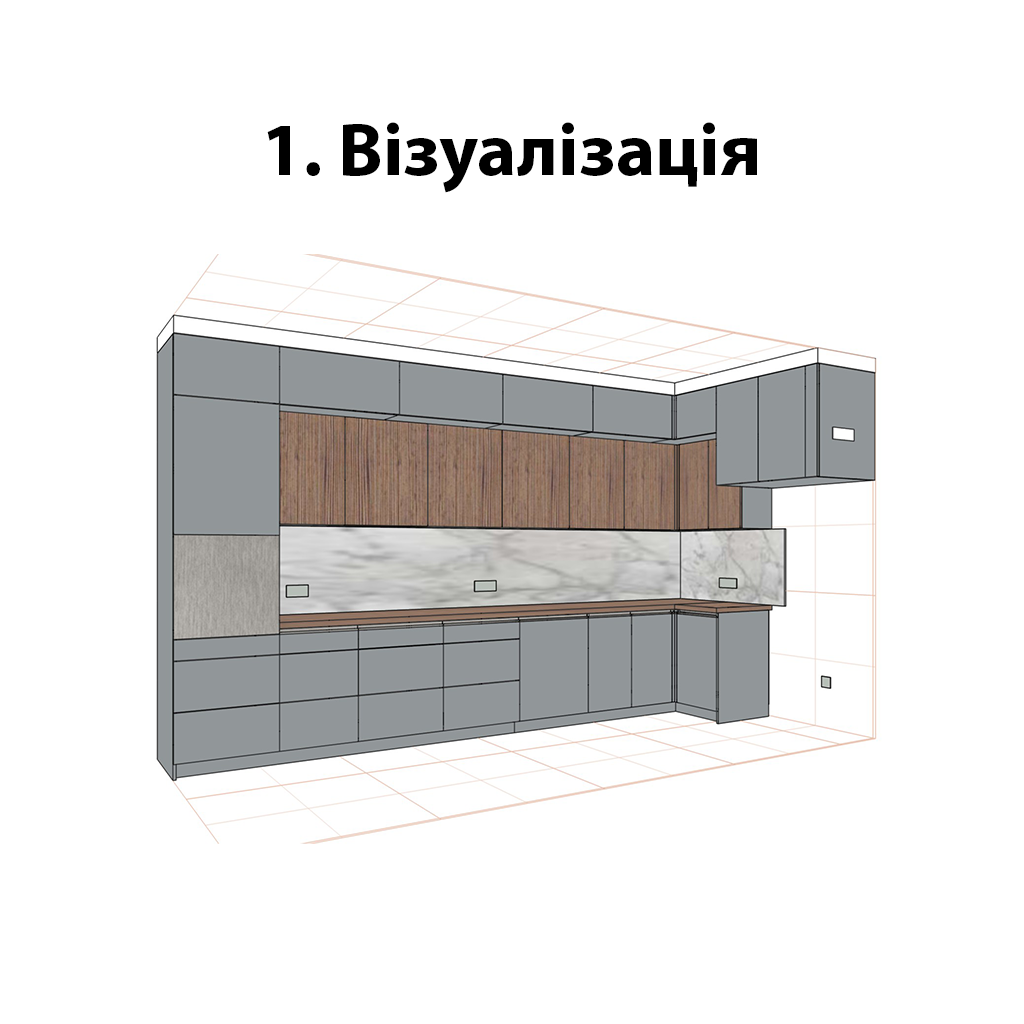
<style>
.page{position:relative;width:1024px;height:1024px;background:#ffffff}
.page>*{position:absolute;margin:0}
.t1{font:75px "MyriadPro-Bold";color:#000000}
</style>
<div class="page">
<p class="t1" style="left:267px;top:122px;width:490px;height:71px">1. Візуалізація</p>
</div>
